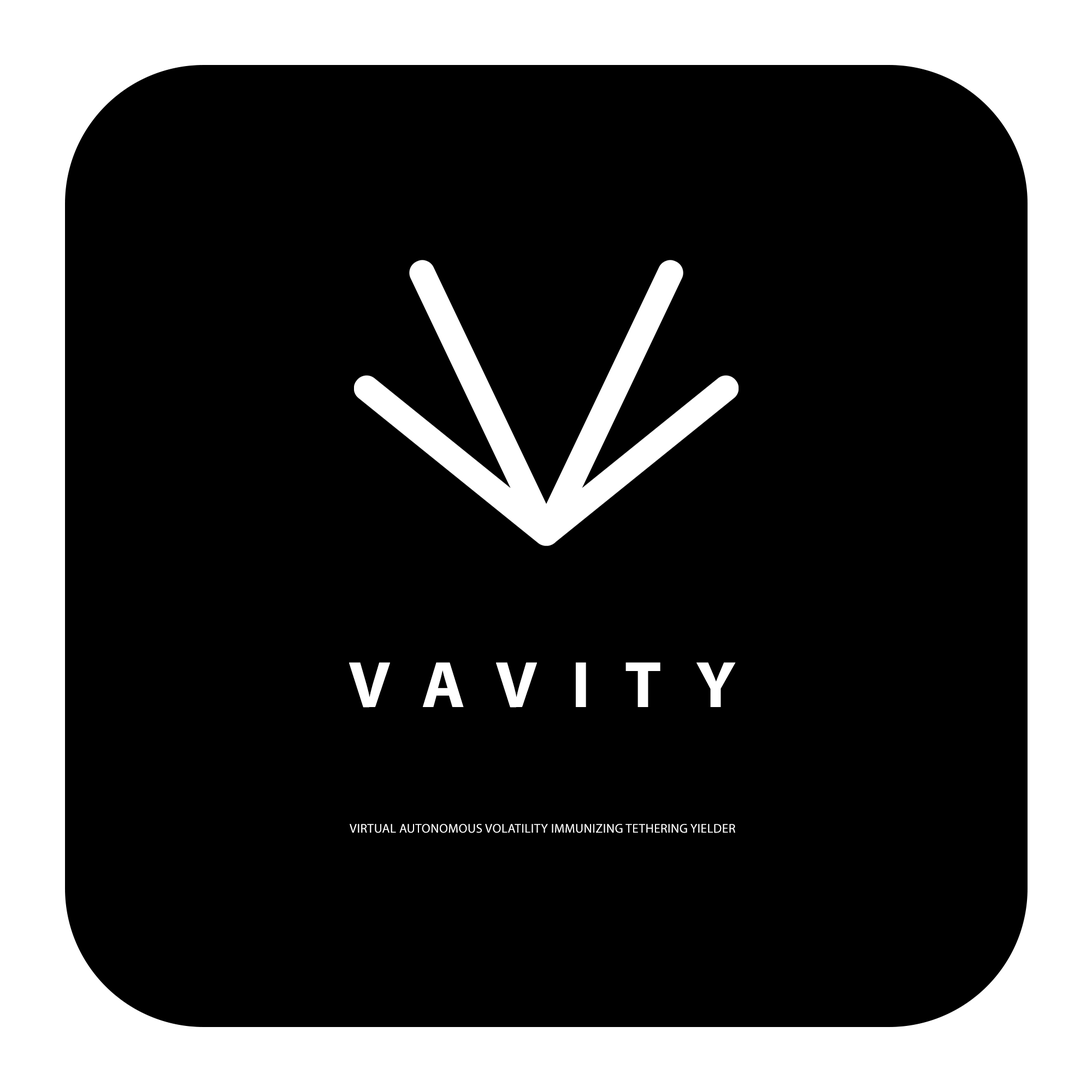
<style>
.page{position:relative;width:1092px;height:1092px;background:#000000}
.page>*{position:absolute;margin:0}
.t1{font:66px "MyriadPro-Bold";letter-spacing:0.52em;color:#ffffff}
.t2{font:12.7px "MyriadPro-Regular";letter-spacing:0.02em;color:#ffffff}
</style>
<div class="page">
<p class="t1" style="left:349px;top:662px;width:387px;height:46px">VAVITY</p>
<p class="t2" style="left:350px;top:824px;width:385px;height:9px">VIRTUAL AUTONOMOUS VOLATILITY IMMUNIZING TETHERING YIELDER</p>
</div>
